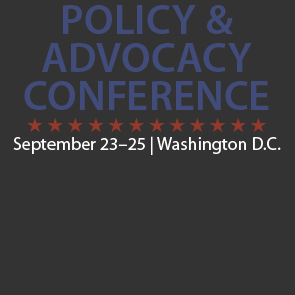
<style>
.page{position:relative;width:295px;height:295px;background:#333333}
.page>*{position:absolute;margin:0}
.t1{font:42px/38px "MyriadPro-Semibold";letter-spacing:0.02em;color:#424c7a;text-transform:uppercase}
.t2{font:18px "MyriadPro-Regular";color:#ffffff}
.t3{font:18px "MyriadPro-Regular";color:#ffffff;text-transform:uppercase}
</style>
<div class="page">
<p class="t1" style="left:24px;top:5px;width:245px;height:105px;text-align:center">Policy &amp;<br>Advocacy<br>Conference</p>
<p class="t2" style="left:13px;top:136px;width:268px;height:19px"><span class="t3">S</span>eptember 23–25 | Washington D.C.</p>
</div>
